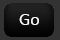
<style>
.page{position:relative;width:60px;height:40px;background:#333333}
.page>*{position:absolute;margin:0}
.t1{font:18px "Calibri";color:#fcfcfb}
</style>
<div class="page">
<p class="t1" style="left:19px;top:14px;width:20px;height:11px">Go</p>
</div>
